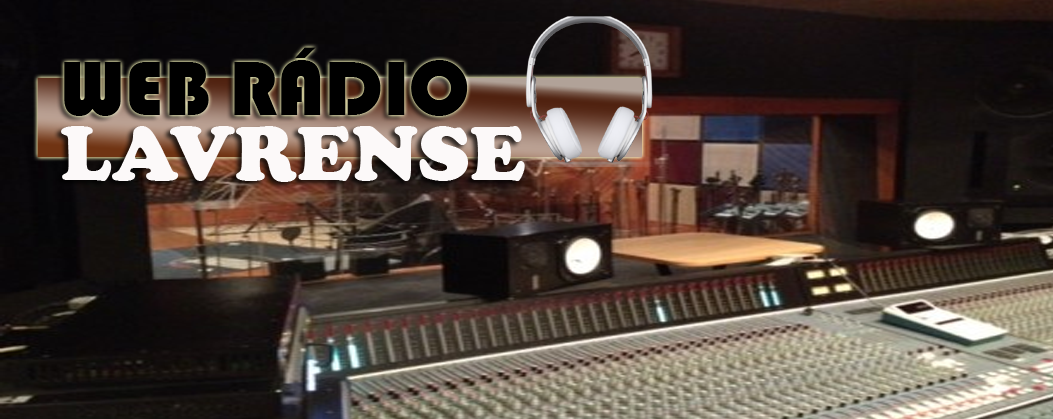
<style>
.page{position:relative;width:1053px;height:419px}
.page>*{position:absolute;margin:0}
.t1{font:80px "Bauhaus93";color:#000000}
.t2{font:80px "CooperBlack";color:#fcf9f9}
</style>
<div class="page">
<p class="t1" style="left:64px;top:47px;width:404px;height:69px">WEB RÁDIO</p>
<p class="t2" style="left:61px;top:126px;width:464px;height:56px">LAVRENSE</p>
</div>
